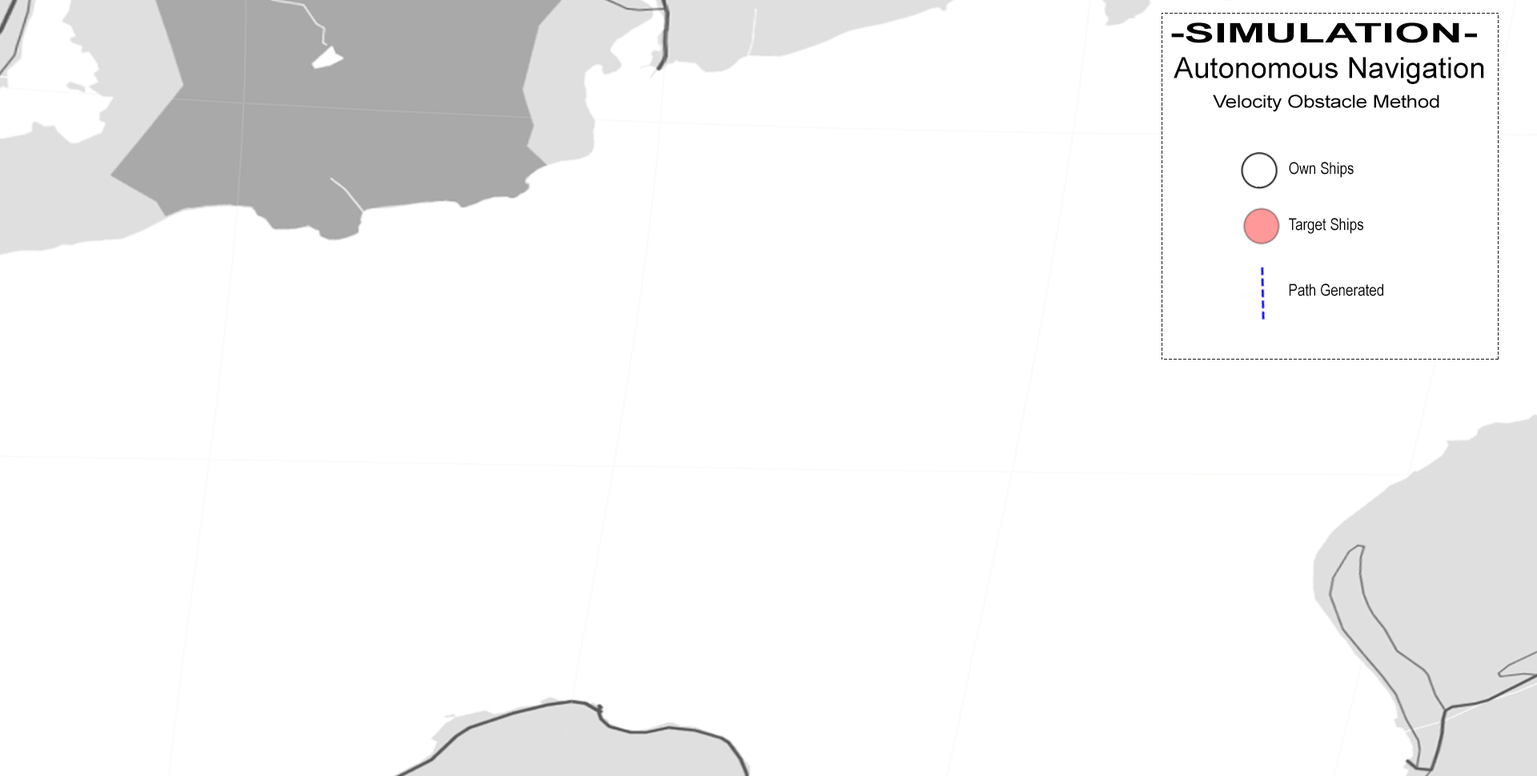
<style>
.page{position:relative;width:1537px;height:776px;background:#ffffff}
.page>*{position:absolute;margin:0}
.t1{font:26.9px "Arial-BoldMT";color:#000000;text-transform:uppercase;scale:1.68 1}
.t2{font:29.3px "ArialMT";color:#000000}
.t3{font:17.9px "ArialMT";letter-spacing:-0.02em;color:#000000;scale:1.17 1}
.t4{font:16.5px "ArialNarrow";color:#000000}
</style>
<div class="page">
<p class="t1" style="left:1171px;top:22px;width:306px;height:21px">-Simulation-</p>
<p class="t2" style="left:1174px;top:57px;width:310px;height:27px">Autonomous Navigation</p>
<p class="t3" style="left:1213px;top:94px;width:226px;height:18px">Velocity Obstacle Method</p>
<p class="t4" style="left:1289px;top:162px;width:65px;height:16px">Own Ships</p>
<p class="t4" style="left:1289px;top:218px;width:74px;height:16px">Target Ships</p>
<p class="t4" style="left:1289px;top:283px;width:94px;height:13px">Path Generated</p>
</div>
